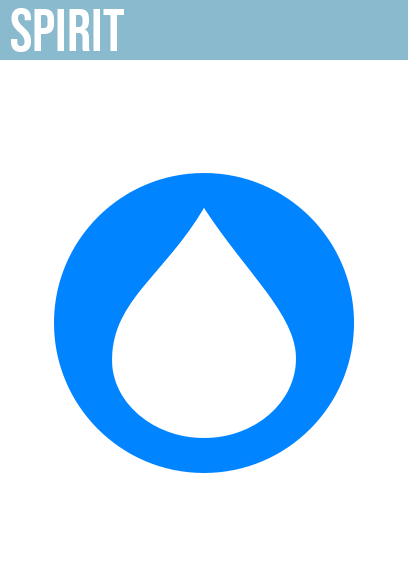
<style>
.page{position:relative;width:408px;height:585px;background:#ffffff}
.page>*{position:absolute;margin:0}
.t1{font:60px "BebasNeue-Regular";color:#ffffff}
</style>
<div class="page">
<p class="t1" style="left:11px;top:8px;width:113px;height:44px">spirit</p>
</div>
